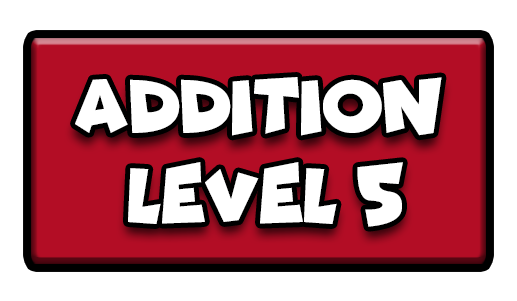
<style>
.page{position:relative;width:517px;height:301px;background:#ffffff}
.page>*{position:absolute;margin:0}
.t1{font:77.7px "Funhouse";color:#ffffff;scale:0.95 1}
</style>
<div class="page">
<p class="t1" style="left:75px;top:77px;width:367px;height:59px">ADDITION</p>
<p class="t1" style="left:128px;top:162px;width:275px;height:65px">LEVEL 5</p>
</div>
